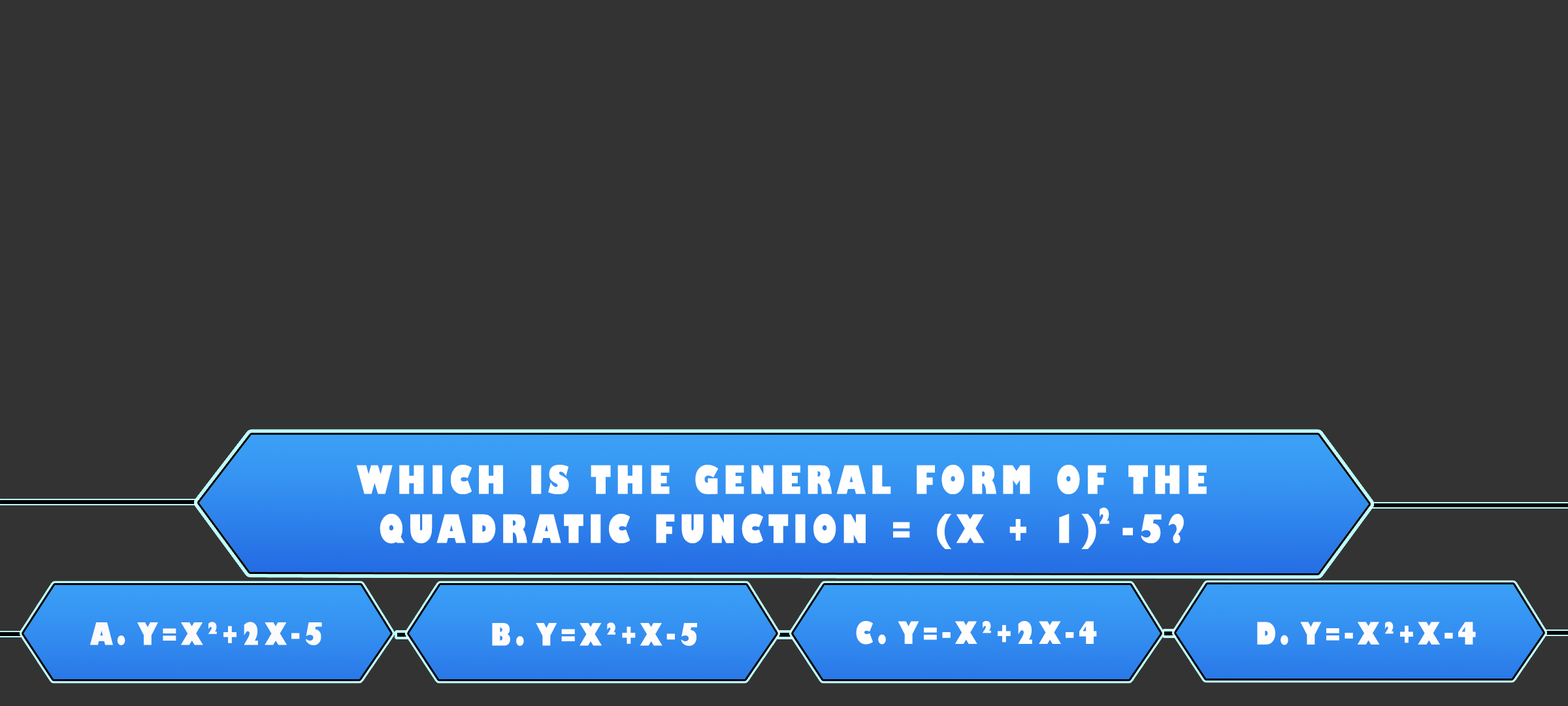
<style>
.page{position:relative;width:1568px;height:706px;background:#333333}
.page>*{position:absolute;margin:0}
.t1{font:38.1px/49px "GillSans-UltraBoldCondensed";letter-spacing:0.115em;color:#ffffff;text-transform:uppercase;scale:1.12 1}
.t2{font:21.1px "GillSans-UltraBoldCondensed";letter-spacing:0.115em;color:#ffffff;text-transform:uppercase;scale:1.11 1}
.t3{font:29.9px "GillSans-UltraBoldCondensed";letter-spacing:0.115em;color:#fcfbfb;text-transform:uppercase;scale:1.12 1}
.t4{font:29.9px "GillSans-UltraBoldCondensed";letter-spacing:0.115em;color:#fefcfc;text-transform:uppercase;scale:1.12 1}
.t5{font:29.9px "GillSans-UltraBoldCondensed";letter-spacing:0.115em;color:#fffefe;text-transform:uppercase;scale:1.12 1}
</style>
<div class="page">
<p class="t1" style="left:357px;top:465px;width:850px;height:84px;text-align:center">Which is the general form of the<br>quadratic function = (x + 1) -5?</p>
<p class="t2" style="left:1099px;top:507px;width:10px;height:17px">2</p>
<p class="t3" style="left:90px;top:621px;width:232px;height:24px">a. y=x²+2x-5</p>
<p class="t4" style="left:492px;top:622px;width:205px;height:23px">b. y=x²+x-5</p>
<p class="t5" style="left:856px;top:621px;width:241px;height:23px">c. y=-x²+2x-4</p>
<p class="t4" style="left:1257px;top:621px;width:219px;height:24px">d. y=-x²+x-4</p>
</div>
